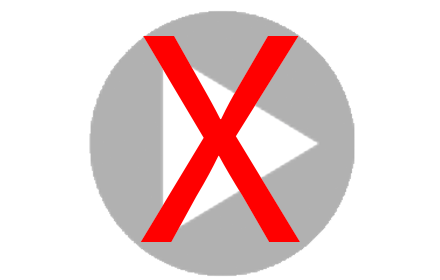
<style>
.page{position:relative;width:440px;height:280px;background:#ffffff}
.page>*{position:absolute;margin:0}
.t1{font:305.8px "MyriadPro-Regular";color:#ff0000}
</style>
<div class="page">
<p class="t1" style="left:140px;top:36px;width:160px;height:206px">X</p>
</div>
